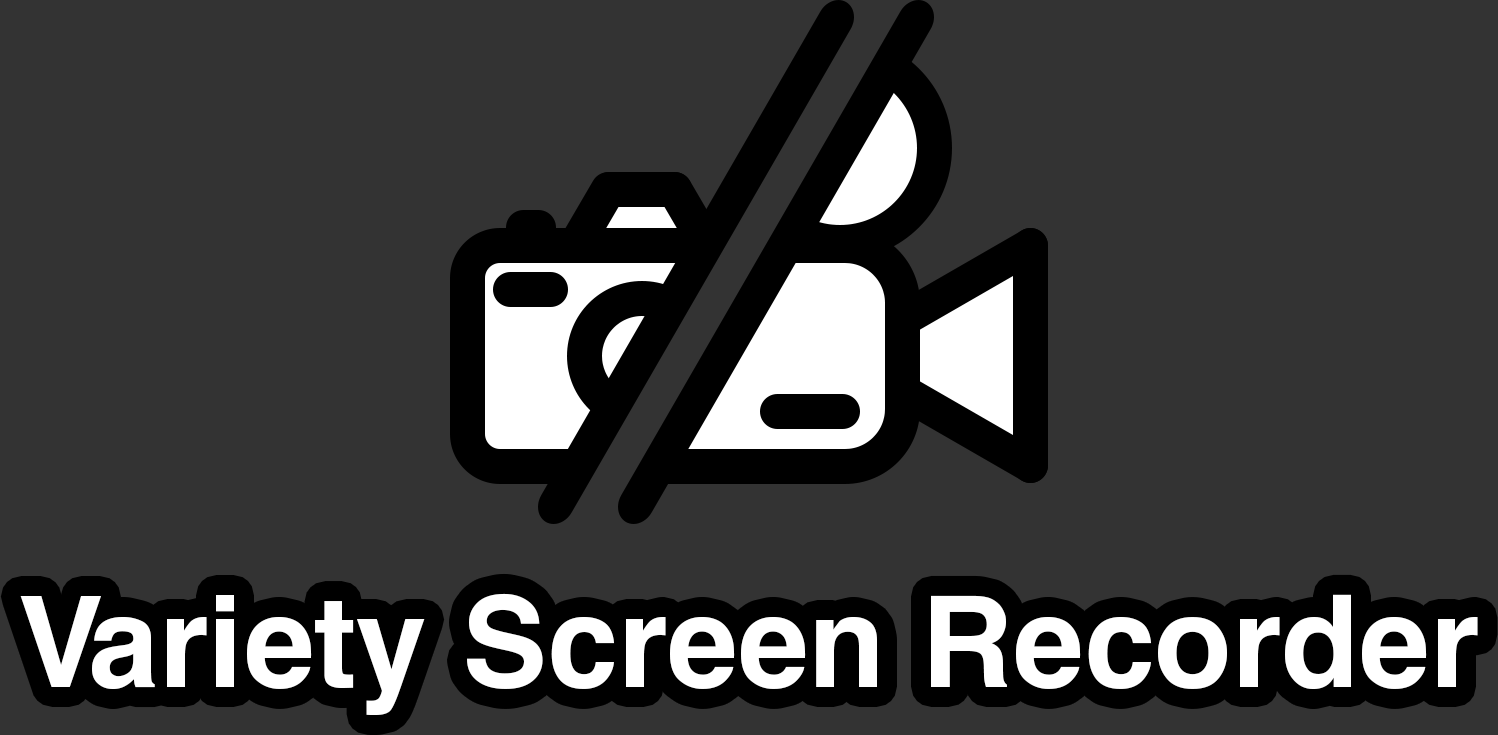
<style>
.page{position:relative;width:1498px;height:735px;background:#333333}
.page>*{position:absolute;margin:0}
.t1{font:127px "Helvetica-Bold";color:#ffffff}
</style>
<div class="page">
<p class="t1" style="left:20px;top:593px;width:1458px;height:122px">Variety Screen Recorder</p>
</div>
